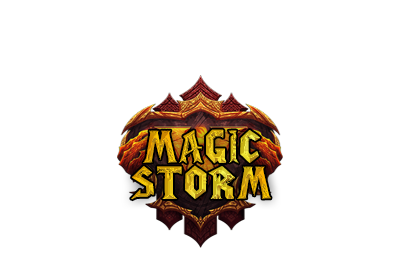
<style>
.page{position:relative;width:399px;height:256px;background:#ffffff}
.page>*{position:absolute;margin:0}
.t1{font:30px "WoW-plexus"}
</style>
<div class="page">
<p class="t1" style="left:131px;top:129px;width:140px;height:71px;text-align:center">MagiC<br>Storm</p>
</div>
